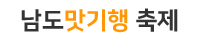
<style>
.page{position:relative;width:200px;height:40px;background:#ffffff}
.page>*{position:absolute;margin:0}
.t1{font:24px "NanumSquareEB";color:#ff9604}
.t2{font:24px "NanumSquareEB";color:#333333}
</style>
<div class="page">
<p class="t1" style="left:21px;top:8px;width:157px;height:25px"><span class="t2">남도</span>맛기행<span class="t2"> 축제</span></p>
</div>
